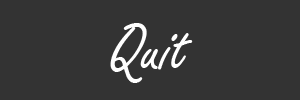
<style>
.page{position:relative;width:300px;height:100px;background:#333333}
.page>*{position:absolute;margin:0}
.t1{font:72px "FreestyleScript-Regular";color:#ffffff}
</style>
<div class="page">
<p class="t1" style="left:110px;top:23px;width:83px;height:60px">Quit</p>
</div>
